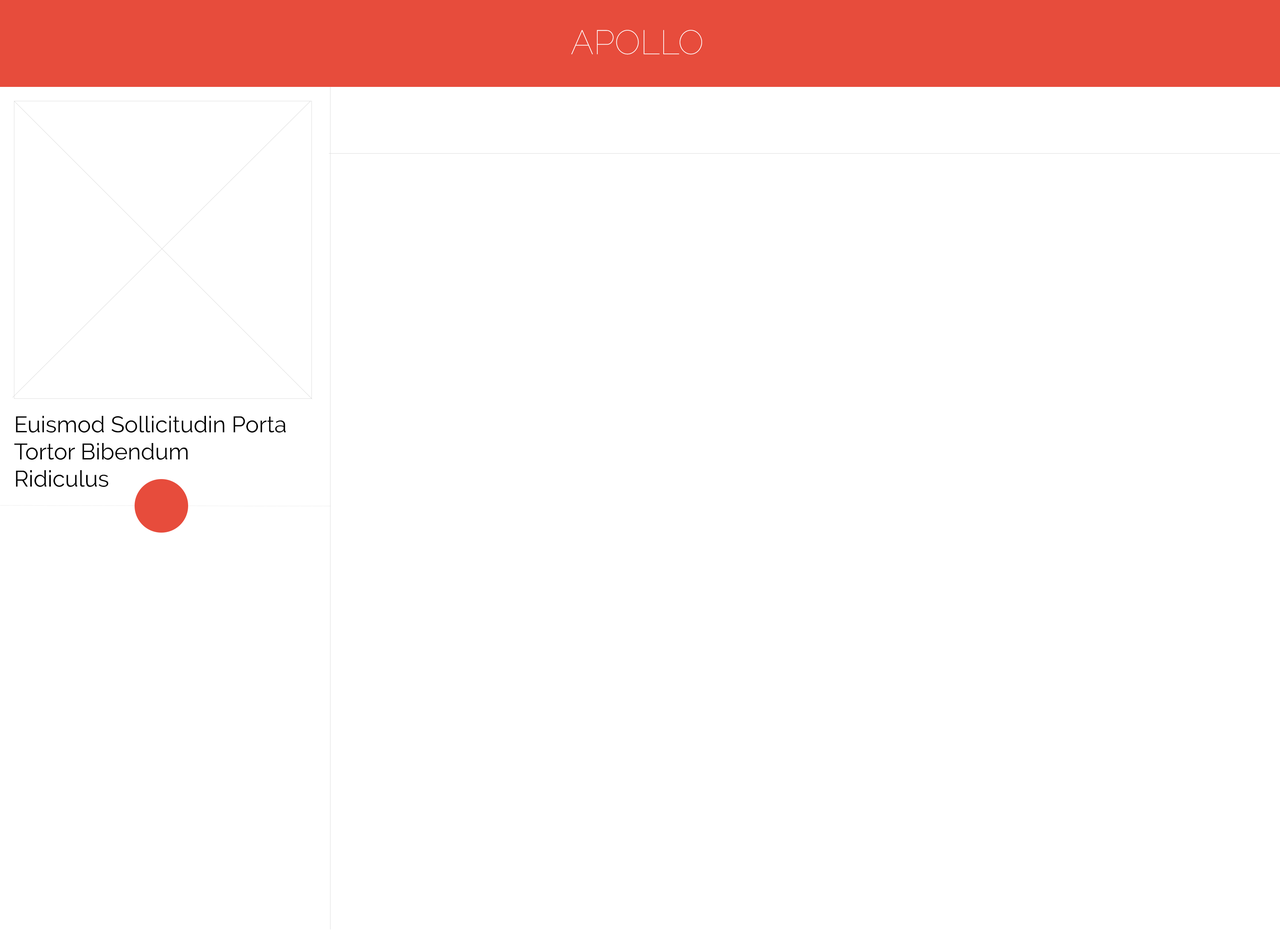
<style>
.page{position:relative;width:1280px;height:931px;background:#ffffff}
.page>*{position:absolute;margin:0}
.t1{font:34px "Raleway-Thin";color:#ffffff}
.t2{font:22.6px "Raleway-Regular";color:#000000}
</style>
<div class="page">
<p class="t1" style="left:571px;top:30px;width:131px;height:25px">APOLLO</p>
<p class="t2" style="left:14px;top:416px;width:272px;height:71px">Euismod Sollicitudin Porta<br>Tortor Bibendum<br>Ridiculus</p>
</div>
